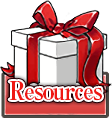
<style>
.page{position:relative;width:112px;height:118px;background:#ffffff}
.page>*{position:absolute;margin:0}
.t1{font:25px "RyuminPro-ExBold";letter-spacing:-0.08em;color:#ee1814;scale:0.9 1}
</style>
<div class="page">
<p class="t1" style="left:9px;top:81px;width:93px;height:20px">Resources</p>
</div>
